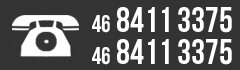
<style>
.page{position:relative;width:240px;height:70px;background:#333333}
.page>*{position:absolute;margin:0}
.t1{font:24px "BebasNeueBold";color:#ffffff}
.t2{font:35px "BebasNeueBold";color:#ffffff}
</style>
<div class="page">
<p class="t1" style="left:92px;top:15px;width:18px;height:18px">46</p>
<p class="t2" style="left:117px;top:7px;width:115px;height:26px">8411 3375</p>
<p class="t2" style="left:117px;top:39px;width:115px;height:26px">8411 3375</p>
<p class="t1" style="left:92px;top:47px;width:18px;height:18px">46</p>
</div>
